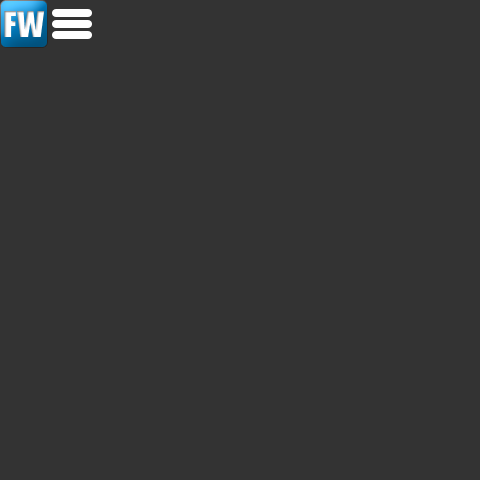
<style>
.page{position:relative;width:480px;height:480px;background:#333333}
.page>*{position:absolute;margin:0}
.t1{font:33.3px "Impact";color:#ffffff;text-transform:uppercase}
</style>
<div class="page">
<p class="t1" style="left:4px;top:11px;width:41px;height:26px">fw</p>
</div>
